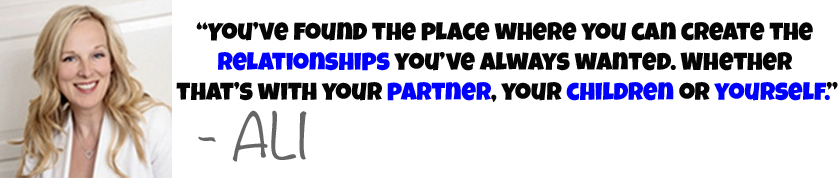
<style>
.page{position:relative;width:838px;height:180px;background:#ffffff}
.page>*{position:absolute;margin:0}
.t1{font:25px "LuckiestGuy-Regular";color:#050505}
.t2{font:25px "LuckiestGuy-Regular";color:#0000ff}
.t3{font:57.1px "Noteworthy-Light";color:#666666}
</style>
<div class="page">
<p class="t1" style="left:176px;top:22px;width:662px;height:81px;text-align:center">“You’ve found the place where you can create the <br><span class="t2">relationships</span> you’ve always wanted. Whether <br>that’s with your <span class="t2">partner</span>, your <span class="t2">children </span>or <span class="t2">yourself.</span>”</p>
<p class="t3" style="left:198px;top:110px;width:109px;height:52px">- ALI</p>
</div>
